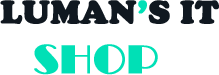
<style>
.page{position:relative;width:219px;height:75px;background:#ffffff}
.page>*{position:absolute;margin:0}
.t1{font:33.3px "CooperBlack";color:#101820;text-transform:uppercase;font-weight:bold}
.t2{font:33.3px "CooperBlack";color:#00e0b6;text-transform:uppercase;font-weight:bold}
.t3{font:41.7px "Broadway";color:#00e0b6;text-transform:uppercase;font-weight:bold}
</style>
<div class="page">
<p class="t1" style="left:0px;top:0px;width:219px;height:75px">LUMAN<span class="t2">’</span>S IT<br>   <span class="t3">SHOP</span></p>
</div>
